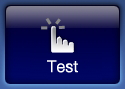
<style>
.page{position:relative;width:125px;height:89px}
.page>*{position:absolute;margin:0}
.t1{font:16px "HelveticaNeueLTPro-Lt";color:#ffffff;font-weight:bold}
</style>
<div class="page">
<p class="t1" style="left:47px;top:60px;width:31px;height:13px">Test</p>
</div>
